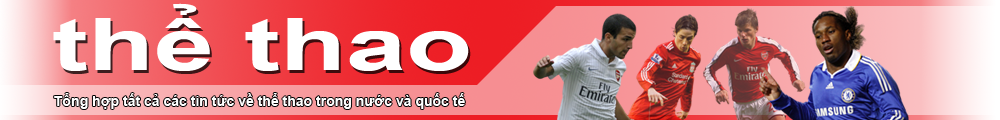
<style>
.page{position:relative;width:1000px;height:120px}
.page>*{position:absolute;margin:0}
.t1{font:72px "Arial-BoldMT";color:#ffffff;scale:1.5 1}
.t2{font:14px "Arial-BoldMT";color:#ffffff}
</style>
<div class="page">
<p class="t1" style="left:53px;top:3px;width:416px;height:68px">thể thao</p>
<p class="t2" style="left:54px;top:93px;width:411px;height:16px">Tổng hợp tất cả các tin tức về thể thao trong nước và quốc tế</p>
</div>
